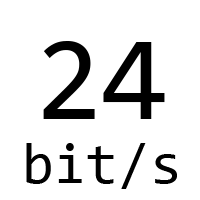
<style>
.page{position:relative;width:200px;height:200px;background:#ffffff}
.page>*{position:absolute;margin:0}
.t1{font:120.8px "Consolas";color:#000000}
.t2{font:58.3px "Consolas";color:#000000}
</style>
<div class="page">
<p class="t1" style="left:43px;top:41px;width:122px;height:78px">24</p>
<p class="t2" style="left:26px;top:143px;width:151px;height:46px">bit/s</p>
</div>
